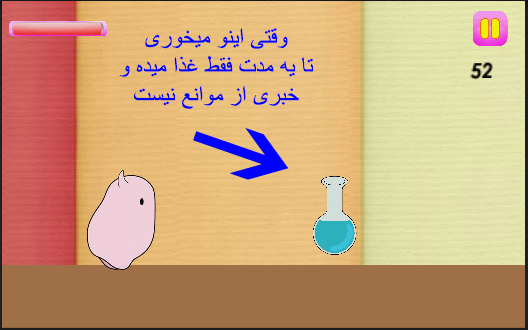
<style>
.page{position:relative;width:528px;height:330px}
.page>*{position:absolute;margin:0}
.t1{font:24px "ArialMT";color:#0000ff}
</style>
<div class="page">
<p class="t1" style="left:119px;top:28px;width:194px;height:81px;text-align:center">وقتی اینو میخوری<br>تا یه مدت فقط غذا میده و<br>خبری از موانع نیست</p>
</div>
